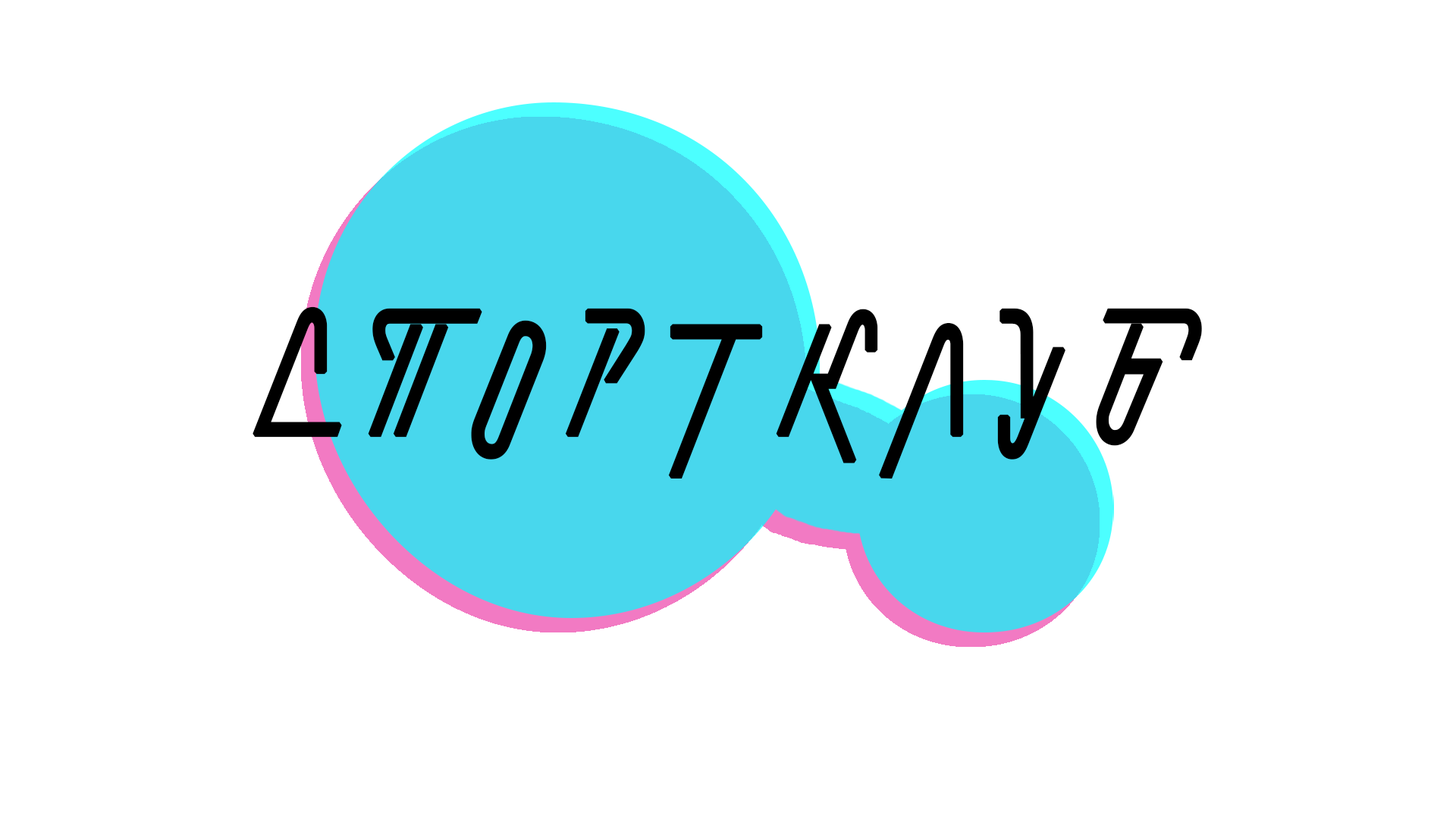
<style>
.page{position:relative;width:1456px;height:819px;background:#ffffff}
.page>*{position:absolute;margin:0}
.t1{font:207.8px "ALSJunior-Regular";letter-spacing:0.06em;color:#000000;font-weight:bold;scale:0.73 1}
</style>
<div class="page">
<p class="t1" style="left:253px;top:306px;width:949px;height:173px">СПОРТКЛУБ</p>
</div>
